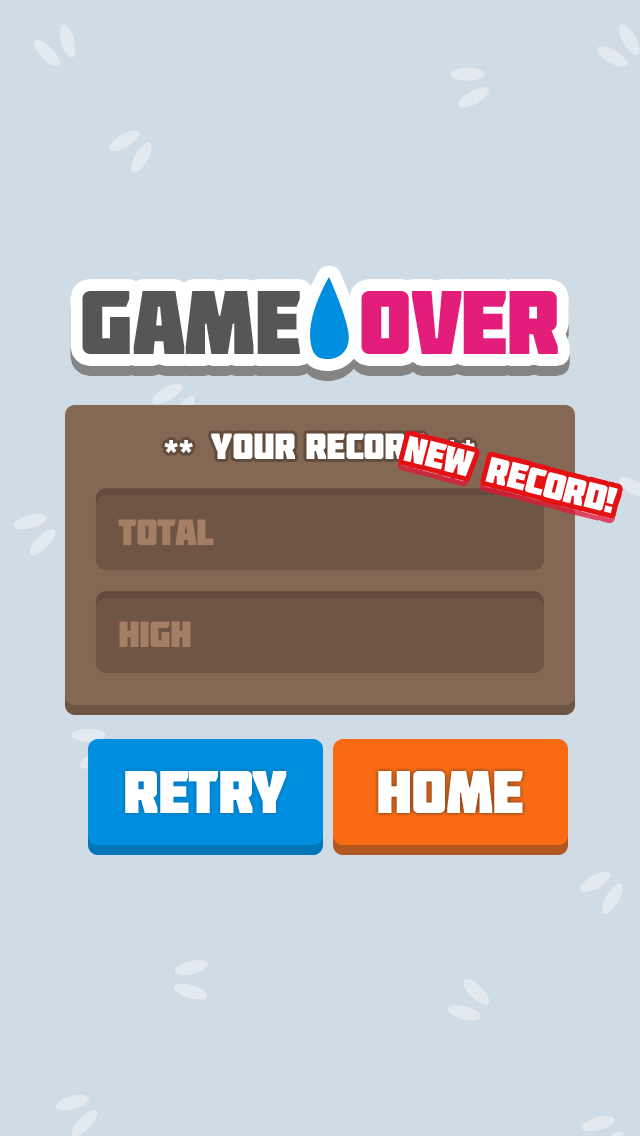
<style>
.page{position:relative;width:640px;height:1136px;background:#d0dce5}
.page>*{position:absolute;margin:0}
.t1{font:90px "Molot";letter-spacing:-0.02em;color:#e21d7a}
.t2{font:90px "Molot";letter-spacing:-0.02em;color:#565656}
.t3{font:90px "Molot";letter-spacing:0.16em;color:#565656}
.t4{font:36.5px "Molot";letter-spacing:-0.02em;color:#ffffff}
.t5{font:36.5px "Molot";letter-spacing:-0.02em;color:#a47f66}
.t6{font:60px "Molot";letter-spacing:-0.02em;color:#ffffff}
</style>
<div class="page">
<p class="t1" style="left:82px;top:291px;width:476px;height:63px"><span class="t2">GAM</span><span class="t3">E </span>OVER</p>
<p class="t1" style="left:82px;top:301px;width:476px;height:63px"><span class="t2">GAM</span><span class="t3">E </span>OVER</p>
<p class="t4" style="left:164px;top:433px;width:311px;height:26px">** YOUR Record **</p>
<p class="t4" style="left:403px;top:435px;width:215px;height:79px;rotate:14deg">New Record!</p>
<p class="t4" style="left:403px;top:435px;width:215px;height:79px;rotate:14deg">new record!</p>
<p class="t4" style="left:402px;top:440px;width:215px;height:79px;rotate:14deg;opacity:0.5">New Record!</p>
<p class="t4" style="left:402px;top:440px;width:215px;height:79px;rotate:14deg;opacity:0.5">New Record!</p>
<p class="t5" style="left:118px;top:519px;width:96px;height:26px">total</p>
<p class="t5" style="left:119px;top:621px;width:72px;height:26px">HIGH</p>
<p class="t6" style="left:125px;top:771px;width:162px;height:42px">RETRY</p>
<p class="t6" style="left:378px;top:771px;width:145px;height:42px">HOME</p>
</div>
